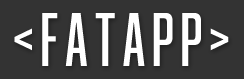
<style>
.page{position:relative;width:244px;height:79px;background:#333333}
.page>*{position:absolute;margin:0}
.t1{font:80px "CoolveticaCompressedRg-Regular";color:#ffffff}
</style>
<div class="page">
<p class="t1" style="left:14px;top:13px;width:215px;height:53px">&lt; F A T A P P &gt;</p>
</div>
